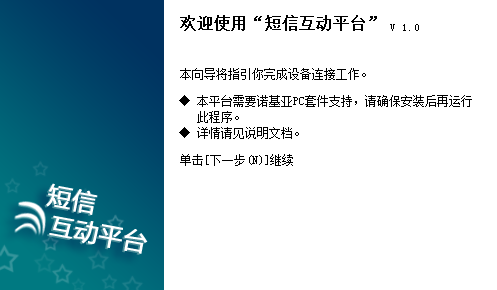
<style>
.page{position:relative;width:497px;height:290px;background:#ffffff}
.page>*{position:absolute;margin:0}
.t1{font:16px "SimSun";color:#000000;font-weight:bold}
.t2{font:10.7px "SimSun";color:#000000}
.t3{font:12px "SimSun";color:#000000}
.t4{font:12px/16px "SimSun";color:#000000}
.t5{font:24px/29.3px "MicrosoftYaHei";font-weight:bold}
.t6{font:24px/29.3px "MicrosoftYaHei";color:#ffffff;font-weight:bold}
</style>
<div class="page">
<p class="t1" style="left:180px;top:15px;width:197px;height:16px">欢迎使用“短信互动平台”</p>
<p class="t2" style="left:390px;top:24px;width:29px;height:7px">V 1.0</p>
<p class="t3" style="left:180px;top:68px;width:186px;height:12px">本向导将指引你完成设备连接工作。</p>
<p class="t4" style="left:179px;top:95px;width:293px;height:44px">◆ 本平台需要诺基亚PC套件支持，请确保安装后再运行<br>   此程序。<br>◆ 详情请见说明文档。</p>
<p class="t3" style="left:180px;top:154px;width:113px;height:12px">单击[下一步(N)]继续</p>
<p class="t5" style="left:44px;top:185px;width:102px;height:70px;rotate:11deg">短信<br> 互动平台</p>
<p class="t6" style="left:46px;top:183px;width:102px;height:71px;rotate:11deg">短信<br> 互动平台</p>
</div>
